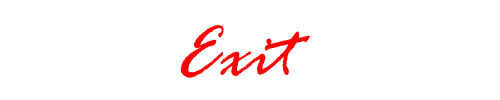
<style>
.page{position:relative;width:500px;height:100px;background:#ffffff}
.page>*{position:absolute;margin:0}
.t1{font:78px "RageItalic";color:#ff0000}
</style>
<div class="page">
<p class="t1" style="left:180px;top:25px;width:130px;height:53px">Exit</p>
</div>
